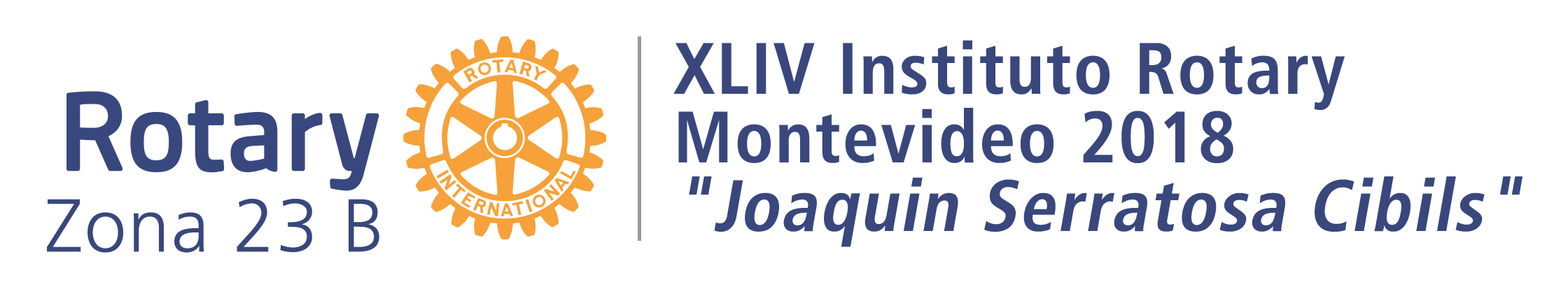
<style>
.page{position:relative;width:1568px;height:287px;background:#ffffff}
.page>*{position:absolute;margin:0}
.t1{font:72.8px/68.6px "FrutigerLTStd-BoldCn";letter-spacing:0.025em;color:#39477d}
.t2{font:72.8px/68.6px "FrutigerLTStd-BoldCn";letter-spacing:0.025em;color:#39477d;font-style:italic}
.t3{font:74.7px "FrutigerLTStd-Light";letter-spacing:0.025em;color:#39477d}
</style>
<div class="page">
<p class="t1" style="left:673px;top:40px;width:849px;height:207px">XLIV Instituto Rotary<br>Montevideo 2018<br><span class="t2">"Joaquin Serratosa Cibils"</span></p>
<p class="t3" style="left:47px;top:199px;width:332px;height:54px">Zona 23 B</p>
</div>
